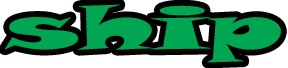
<style>
.page{position:relative;width:288px;height:68px;background:#00a651}
.page>*{position:absolute;margin:0}
.t1{font:60px "SnapITC-Regular";color:#00a651;scale:2 1}
</style>
<div class="page">
<p class="t1" style="left:4px;top:4px;width:277px;height:59px">ship</p>
</div>
